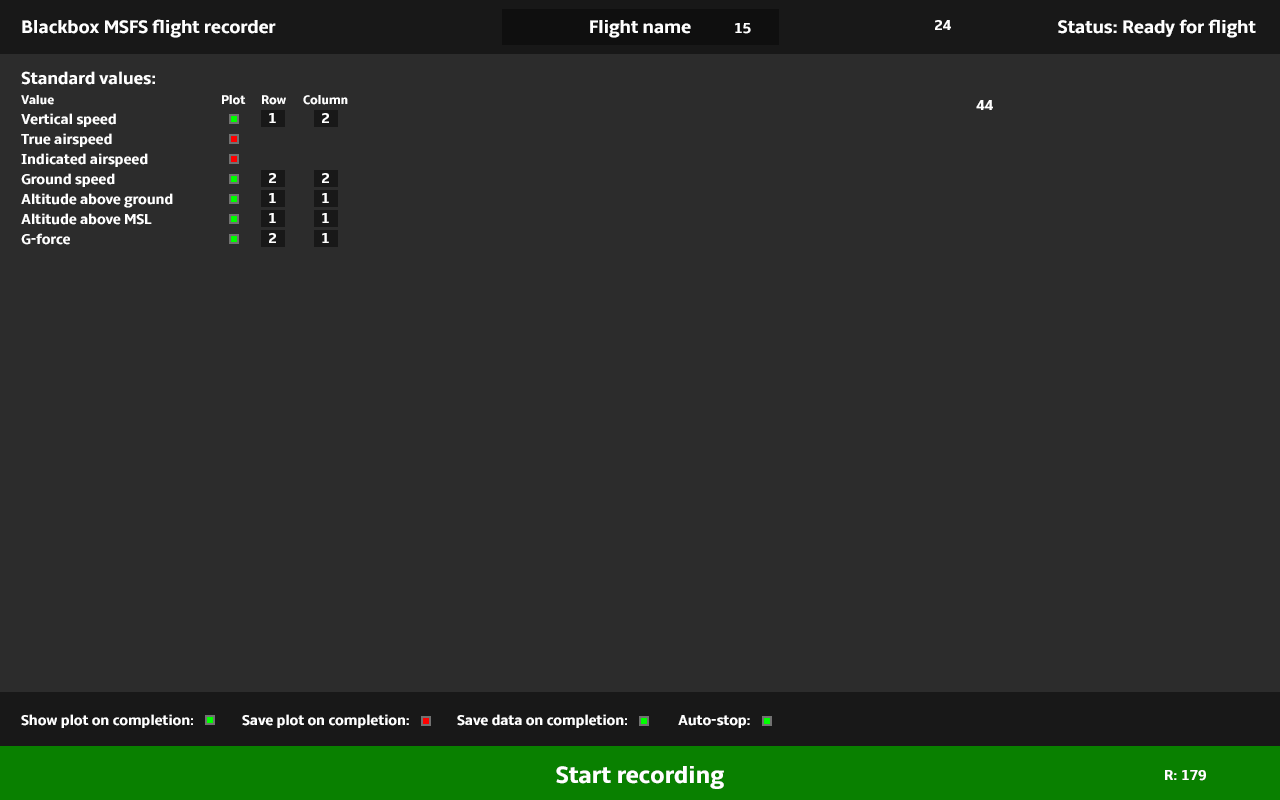
<style>
.page{position:relative;width:1280px;height:800px;background:#2c2c2c}
.page>*{position:absolute;margin:0}
.t1{font:19px "Amble-Bold";letter-spacing:-0.015em;color:#ffffff}
.t2{font:15px "Amble-Bold";letter-spacing:-0.015em;color:#ffffff}
.t3{font:18px "Amble-Bold";letter-spacing:-0.015em;color:#ffffff}
.t4{font:13px "Amble-Bold";letter-spacing:-0.015em;color:#ffffff}
.t5{font:25px "Amble-Bold";letter-spacing:-0.015em;color:#ffffff}
</style>
<div class="page">
<p class="t1" style="left:22px;top:19px;width:254px;height:19px">Blackbox MSFS flight recorder</p>
<p class="t1" style="left:590px;top:20px;width:101px;height:18px">Flight name</p>
<p class="t2" style="left:735px;top:23px;width:16px;height:11px">15</p>
<p class="t2" style="left:935px;top:20px;width:16px;height:10px">24</p>
<p class="t1" style="left:1058px;top:19px;width:198px;height:19px">Status: Ready for flight</p>
<p class="t3" style="left:21px;top:71px;width:134px;height:14px">Standard values:</p>
<p class="t4" style="left:21px;top:95px;width:33px;height:10px">Value</p>
<p class="t4" style="left:222px;top:95px;width:24px;height:10px">Plot</p>
<p class="t4" style="left:262px;top:95px;width:24px;height:10px">Row</p>
<p class="t4" style="left:303px;top:95px;width:45px;height:10px">Column</p>
<p class="t2" style="left:976px;top:100px;width:17px;height:10px">44</p>
<p class="t2" style="left:21px;top:113px;width:95px;height:14px">Vertical speed</p>
<p class="t2" style="left:269px;top:113px;width:7px;height:10px">1</p>
<p class="t2" style="left:322px;top:113px;width:7px;height:10px">2</p>
<p class="t2" style="left:21px;top:133px;width:91px;height:14px">True airspeed</p>
<p class="t2" style="left:21px;top:153px;width:127px;height:14px">Indicated airspeed</p>
<p class="t2" style="left:21px;top:173px;width:94px;height:14px">Ground speed</p>
<p class="t2" style="left:269px;top:173px;width:7px;height:10px">2</p>
<p class="t2" style="left:322px;top:173px;width:7px;height:10px">2</p>
<p class="t2" style="left:21px;top:193px;width:152px;height:15px">Altitude above ground</p>
<p class="t2" style="left:269px;top:193px;width:7px;height:10px">1</p>
<p class="t2" style="left:322px;top:193px;width:7px;height:10px">1</p>
<p class="t2" style="left:21px;top:213px;width:131px;height:12px">Altitude above MSL</p>
<p class="t2" style="left:269px;top:213px;width:7px;height:10px">1</p>
<p class="t2" style="left:322px;top:213px;width:7px;height:10px">1</p>
<p class="t2" style="left:21px;top:233px;width:49px;height:12px">G-force</p>
<p class="t2" style="left:269px;top:233px;width:7px;height:10px">2</p>
<p class="t2" style="left:322px;top:233px;width:7px;height:10px">1</p>
<p class="t2" style="left:21px;top:714px;width:172px;height:14px">Show plot on completion:</p>
<p class="t2" style="left:242px;top:714px;width:167px;height:14px">Save plot on completion:</p>
<p class="t2" style="left:457px;top:714px;width:170px;height:14px">Save data on completion:</p>
<p class="t2" style="left:678px;top:715px;width:72px;height:13px">Auto-stop:</p>
<p class="t5" style="left:556px;top:766px;width:168px;height:23px">Start recording</p>
<p class="t2" style="left:1165px;top:770px;width:41px;height:11px">R: 179</p>
</div>
